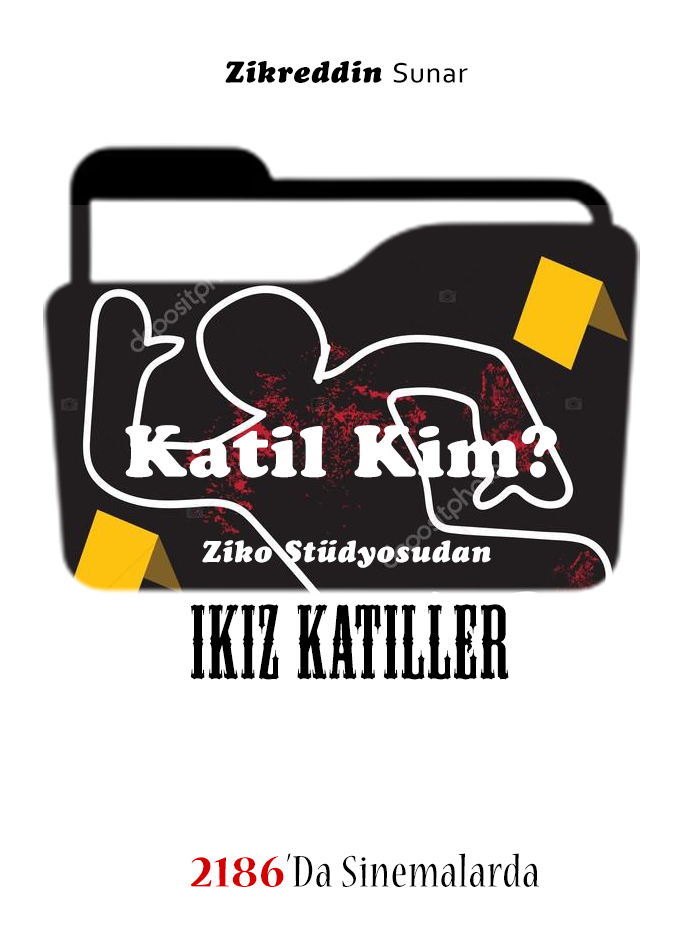
<style>
.page{position:relative;width:684px;height:951px;background:#ffffff}
.page>*{position:absolute;margin:0}
.t1{font:30px "CooperBlackStd-Italic";letter-spacing:0.025em;color:#000000}
.t2{font:30px "Corbel";letter-spacing:0.025em;color:#000000}
.t3{font:72px "CooperBlackStd";letter-spacing:0.025em;color:#ffffff}
.t4{font:30px "CooperBlackStd-Italic";letter-spacing:0.025em;color:#ffffff}
.t5{font:98px "MesquiteStd";letter-spacing:0.025em;color:#000000}
.t6{font:49px "NuevaStd-Cond";letter-spacing:0.025em;color:#000000}
.t7{font:49px "NuevaStd-Bold";letter-spacing:0.025em;color:#d60000}
</style>
<div class="page">
<p class="t1" style="left:225px;top:60px;width:243px;height:23px">Zikreddin <span class="t2">Sunar</span></p>
<p class="t3" style="left:125px;top:425px;width:432px;height:53px">Katil Kim?</p>
<p class="t4" style="left:202px;top:540px;width:289px;height:28px">Ziko Stüdyosudan</p>
<p class="t5" style="left:190px;top:604px;width:319px;height:76px">IKIz Katiller</p>
<p class="t6" style="left:190px;top:853px;width:349px;height:34px"><span class="t7">2186</span>’Da Sinemalarda</p>
</div>
